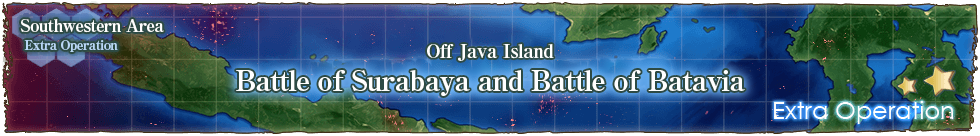
<style>
.page{position:relative;width:980px;height:136px}
.page>*{position:absolute;margin:0}
.t1{font:17px/22px "RyuminPro-ExBold";letter-spacing:-0.04em;color:#ffffff}
.t2{font:13px/22px "RyuminPro-ExBold";letter-spacing:-0.04em;color:#b9d7f5}
.t3{font:19px "RyuminPro-ExBold";letter-spacing:-0.04em;color:#ffffff}
.t4{font:28px "RyuminPro-ExBold";letter-spacing:-0.04em;color:#ffffff}
</style>
<div class="page">
<p class="t1" style="left:20px;top:19px;width:144px;height:33px">Southwestern Area<br>  <span class="t2">Extra Operation</span></p>
<p class="t3" style="left:427px;top:44px;width:127px;height:17px">Off Java Island</p>
<p class="t4" style="left:236px;top:70px;width:509px;height:26px">Battle of Surabaya and Battle of Batavia</p>
</div>
